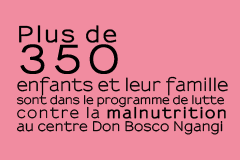
<style>
.page{position:relative;width:240px;height:160px;background:#f18ca0}
.page>*{position:absolute;margin:0}
.t1{font:11.1px/13px "Sansumi-Bold";letter-spacing:0.03em;color:#000000;scale:0.93 1}
.t2{font:24px/25px "Sansumi-Bold";letter-spacing:-0.04em;color:#000000}
.t3{font:21.2px/20px "Sansumi-Bold";letter-spacing:0.12em;color:#000000;font-weight:bold;scale:0.93 1}
.t4{font:38.2px/31px "Sansumi-Bold";letter-spacing:0.12em;color:#000000;font-weight:bold;scale:0.93 1}
.t5{font:17px/18px "Sansumi-Bold";letter-spacing:0.02em;color:#000000;scale:0.93 1}
.t6{font:14.3px/14px "Sansumi-Bold";letter-spacing:0.12em;color:#000000;scale:0.93 1}
.t7{font:14.3px/14px "Sansumi-Bold";letter-spacing:0.12em;color:#000000;font-weight:bold;scale:0.93 1}
.t8{font:12.7px/13px "Sansumi-Bold";letter-spacing:0.04em;color:#000000;scale:0.93 1}
</style>
<div class="page">
<p class="t1" style="left:17px;top:25px;width:211px;height:110px"><span class="t2"><br></span><span class="t3">Plus de<br></span><span class="t4">350<br></span><span class="t5">enfants et leur famille<br></span>sont dans le programme de lutte <br><span class="t6">contre la </span><span class="t7">malnutrition<br></span><span class="t8">au centre Don Bosco Ngangi</span></p>
</div>
